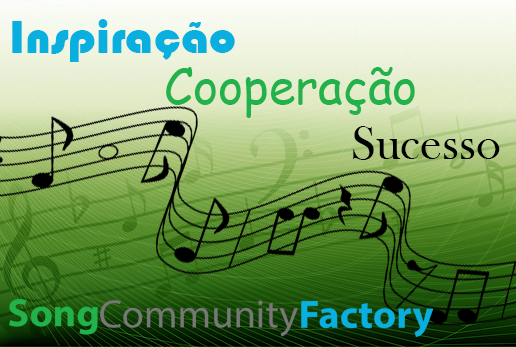
<style>
.page{position:relative;width:516px;height:347px}
.page>*{position:absolute;margin:0}
.t1{font:48px "Bauhaus93";color:#09afdf}
.t2{font:48px "ComicSansMS";color:#21b24b}
.t3{font:48px "BaskOldFace";color:#000000}
</style>
<div class="page">
<p class="t1" style="left:12px;top:19px;width:223px;height:43px">Inspiração</p>
<p class="t2" style="left:166px;top:67px;width:249px;height:51px">Cooperação</p>
<p class="t3" style="left:353px;top:126px;width:147px;height:34px">Sucesso</p>
</div>
